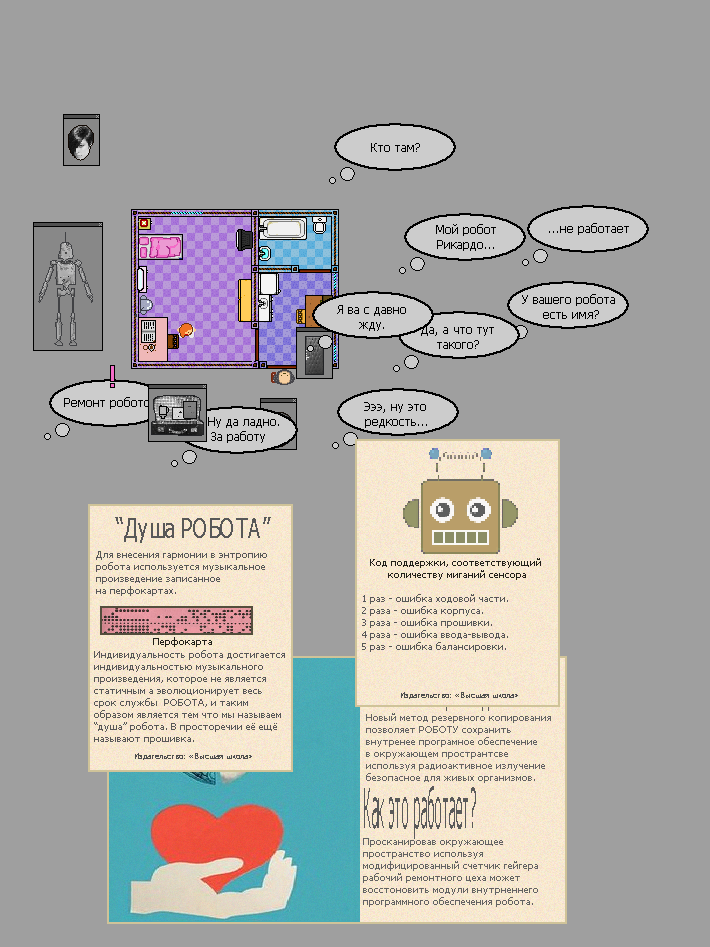
<style>
.page{position:relative;width:710px;height:947px;background:#9f9f9f}
.page>*{position:absolute;margin:0}
.t1{font:12px "Tahoma";color:#000000}
.t2{font:26.5px "Tahoma";color:#585858;scale:0.74 1}
.t3{font:10px "Tahoma";color:#585858}
.t4{font:10px "Tahoma";color:#222019}
.t5{font:8px "Tahoma";color:#4e4e4e}
.t6{font:10px "Tahoma";color:#636363}
.t7{font:54.6px "Tahoma";color:#5a5a5a;scale:0.24 1}
</style>
<div class="page">
<p class="t1" style="left:371px;top:143px;width:49px;height:9px">Кто там?</p>
<p class="t1" style="left:436px;top:224px;width:60px;height:27px;text-align:center">Мой робот<br>Рикардо...</p>
<p class="t1" style="left:549px;top:223px;width:80px;height:12px">...не работает</p>
<p class="t1" style="left:522px;top:294px;width:93px;height:25px;text-align:center">У вашего робота <br>есть имя?</p>
<p class="t1" style="left:337px;top:305px;width:69px;height:26px;text-align:center">Я ва с давно<br>жду.</p>
<p class="t1" style="left:421px;top:325px;width:73px;height:24px;text-align:center">Да, а что тут<br>такого?</p>
<p class="t1" style="left:64px;top:397px;width:92px;height:12px">Ремонт роботов</p>
<p class="t1" style="left:364px;top:402px;width:63px;height:26px;text-align:center">Эээ, ну это <br>редкость...</p>
<p class="t1" style="left:197px;top:417px;width:82px;height:26px;text-align:center">...Ну да ладно.<br>За работу</p>
<p class="t2" style="left:115px;top:517px;width:156px;height:26px">“Душа РОБОТА”</p>
<p class="t3" style="left:96px;top:551px;width:171px;height:45px">Для внесения гармонии в энтропию<br>робота используется музыкальное<br>произведение записанное <br>на перфокартах.</p>
<p class="t4" style="left:370px;top:558px;width:171px;height:22px;text-align:center">Код поддержки, соответствующий <br>количеству миганий сенсора</p>
<p class="t3" style="left:362px;top:594px;width:146px;height:58px">1 раз - ошибка ходовой части.<br>2 раза - ошибка корпуса.<br>3 раза - ошибка прошивки.<br>4 раза - ошибка ввода-вывода.<br>5 раз - ошибка балансировки.</p>
<p class="t4" style="left:153px;top:637px;width:59px;height:10px">Перфокарта</p>
<p class="t3" style="left:94px;top:650px;width:191px;height:94px">Индивидуальность робота достигается<br>индивидуальностью музыкального<br>произведения, которое не является <br>статичным а эволюционирует весь <br>срок службы  РОБОТА, и таким <br>образом является тем что мы называем <br>“душа” робота. В просторечии её ещё <br>называют прошивка.</p>
<p class="t5" style="left:401px;top:692px;width:117px;height:7px">Издательство: «Высшая школа»</p>
<p class="t6" style="left:366px;top:713px;width:185px;height:70px">Новый метод резервного копирования<br>позволяет РОБОТУ сохранить<br>внутренее програмное обеспечение<br>в окружающем пространтсве<br>используя радиоактивное излучение<br>безопасное для живых организмов.</p>
<p class="t5" style="left:135px;top:753px;width:117px;height:7px">Издательство: «Высшая школа»</p>
<p class="t7" style="left:364px;top:786px;width:112px;height:53px">Как это работает?</p>
<p class="t6" style="left:363px;top:838px;width:175px;height:69px">Просканировав окружающее <br>пространство используя <br>модифицированный счетчик гейгера <br>рабочий ремонтного цеха может <br>восстоновить модули внутрненнего <br>программного обеспечения робота.</p>
</div>
